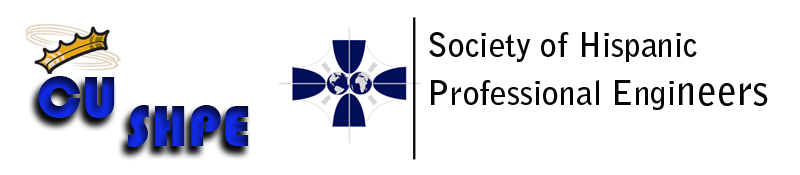
<style>
.page{position:relative;width:800px;height:175px;background:#ffffff}
.page>*{position:absolute;margin:0}
.t1{font:33.4px "BellGothicStd-Bold";color:#050506}
.t2{font:40.1px "BellGothicStd-Bold";color:#050506}
.t3{font:60.2px "Bauhaus93"}
</style>
<div class="page">
<p class="t1" style="left:429px;top:32px;width:339px;height:78px">Society of Hispanic<br>Professional Engi<span class="t2">neers</span></p>
<p class="t3" style="left:38px;top:76px;width:77px;height:42px">CU</p>
<p class="t3" style="left:128px;top:105px;width:121px;height:42px">SHPE</p>
</div>
